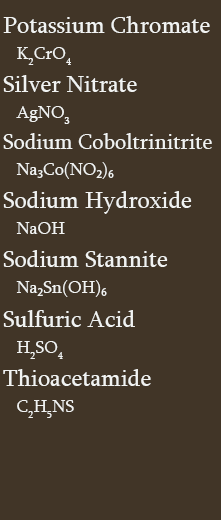
<style>
.page{position:relative;width:221px;height:520px;background:#413527}
.page>*{position:absolute;margin:0}
.t1{font:22px "Sylfaen";color:#f1f3f2}
.t2{font:24px "Sylfaen";color:#f1f3f2}
.t3{font:18px "Sylfaen";color:#f1f3f2}
.t4{font:18px "MyriadPro-Regular";color:#f1f3f2}
</style>
<div class="page">
<p class="t1" style="left:3px;top:16px;width:209px;height:402px"><span class="t2"><br>Potassium Chromate<br></span><span class="t3">   K2CrO4<br></span><span class="t2">Silver Nitrate<br></span><span class="t3">   AgNO3<br></span>Sodium Coboltrinitrite<br><span class="t3">   Na</span><span class="t4">₃</span><span class="t3">Co(NO</span><span class="t4">₂</span><span class="t3">)</span><span class="t4">₆<br></span><span class="t2">Sodium Hydroxide<br></span><span class="t3">   NaOH<br></span><span class="t2">Sodium Stannite<br></span><span class="t3">   Na</span><span class="t4">₂</span><span class="t3">Sn(OH)</span><span class="t4">₆<br></span><span class="t2">Sulfuric Acid<br></span><span class="t3">   H2SO4 <br></span><span class="t2">Thioacetamide<br></span><span class="t3">   C2H5NS</span></p>
</div>
